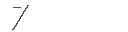
<style>
.page{position:relative;width:128px;height:32px;background:#ffffff}
.page>*{position:absolute;margin:0}
.t1{font:43px "DomDiagonalBT-Regular";letter-spacing:0.075em;color:#ffffff;scale:1.05 1}
</style>
<div class="page">
<p class="t1" style="left:11px;top:3px;width:18px;height:27px">7</p>
</div>
